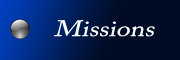
<style>
.page{position:relative;width:180px;height:60px;background:#000c25}
.page>*{position:absolute;margin:0}
.t1{font:22.2px "ACaslonPro-Regular";color:#ffffff;font-style:italic;scale:1.25 1}
</style>
<div class="page">
<p class="t1" style="left:54px;top:20px;width:101px;height:17px">Missions</p>
</div>
